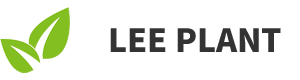
<style>
.page{position:relative;width:300px;height:80px;background:#ffffff}
.page>*{position:absolute;margin:0}
.t1{font:32px "NotoSansKR-Black";color:#333333}
</style>
<div class="page">
<p class="t1" style="left:110px;top:28px;width:171px;height:24px">LEE PLANT</p>
</div>
